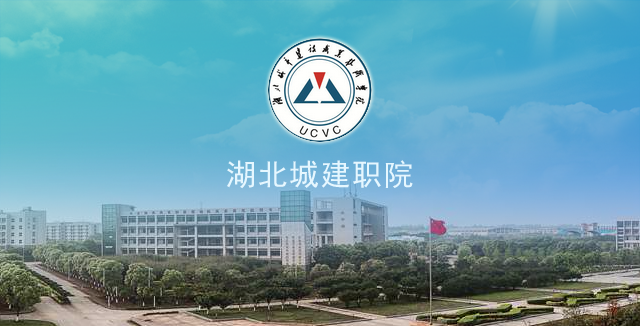
<style>
.page{position:relative;width:640px;height:326px}
.page>*{position:absolute;margin:0}
.t1{font:30px "SimHei";letter-spacing:0.05em;color:#e5f7ff}
</style>
<div class="page">
<p class="t1" style="left:227px;top:160px;width:186px;height:29px">湖北城建职院</p>
</div>
